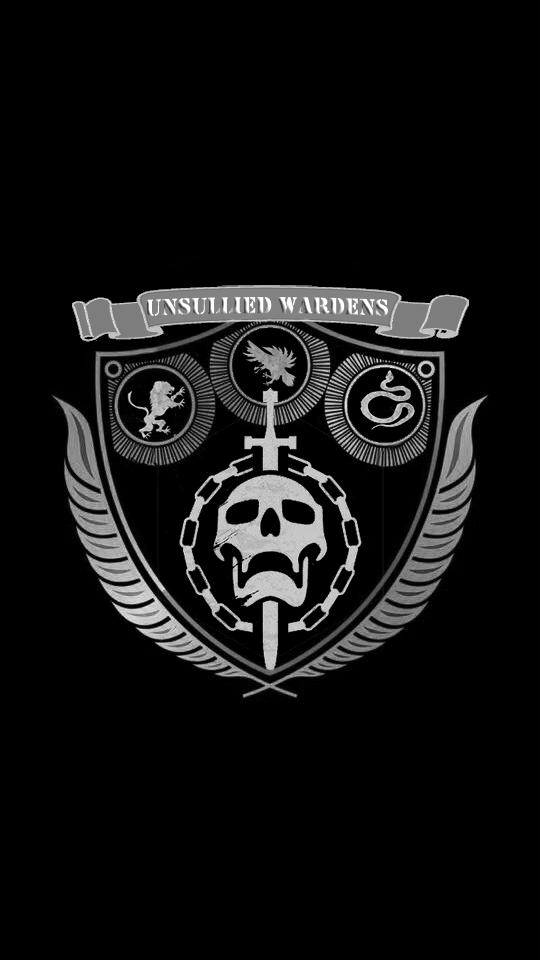
<style>
.page{position:relative;width:540px;height:960px;background:#000000}
.page>*{position:absolute;margin:0}
.t1{font:24px "Stencil"}
</style>
<div class="page">
<p class="t1" style="left:145px;top:297px;width:243px;height:20px">Unsullied Wardens</p>
</div>
